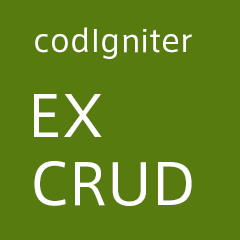
<style>
.page{position:relative;width:240px;height:240px;background:#577b0f}
.page>*{position:absolute;margin:0}
.t1{font:30px "AxisStd-Regular";color:#ffffff}
.t2{font:56px/68px "AxisStd-Regular";color:#ffffff}
</style>
<div class="page">
<p class="t1" style="left:35px;top:27px;width:157px;height:32px">codIgniter</p>
<p class="t2" style="left:34px;top:94px;width:158px;height:112px">EX<br>CRUD</p>
</div>
